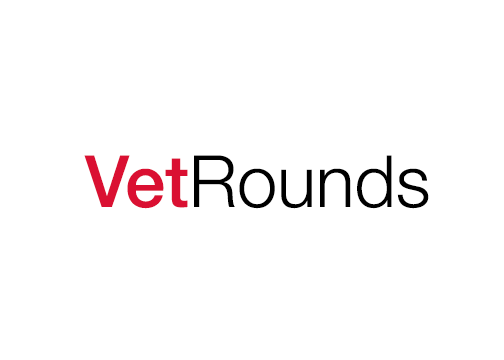
<style>
.page{position:relative;width:504px;height:360px;background:#ffffff}
.page>*{position:absolute;margin:0}
.t1{font:72px "HelveticaNeue-Light";color:#000000}
.t2{font:72px "HelveticaNeue-Medium";color:#da1032}
</style>
<div class="page">
<p class="t1" style="left:84px;top:155px;width:345px;height:54px"><span class="t2">Vet</span>Rounds</p>
</div>
